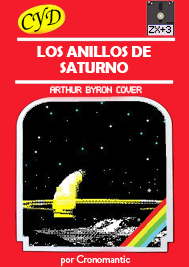
<style>
.page{position:relative;width:189px;height:267px;background:#f41c2b}
.page>*{position:absolute;margin:0}
.t1{font:24px "Calgary-MediumItalic";letter-spacing:-0.025em;color:#000000}
.t2{font:16px "AventurasAD";letter-spacing:-0.025em;color:#000000}
.t3{font:16px/16px "BerlinSansFBDemi-Bold";letter-spacing:-0.025em;color:#ffffff}
.t4{font:15px "AventurasAD";letter-spacing:-0.025em;color:#ffffff}
.t5{font:11px "BrandonGrotesque-Regular";letter-spacing:-0.025em;color:#ffffff}
</style>
<div class="page">
<p class="t1" style="left:21px;top:7px;width:40px;height:26px;rotate:-11deg">CYD</p>
<p class="t2" style="left:148px;top:25px;width:24px;height:9px">ZX+3</p>
<p class="t3" style="left:37px;top:46px;width:114px;height:27px;text-align:center">LOS ANILLOS DE <br>SATURNO</p>
<p class="t4" style="left:50px;top:86px;width:92px;height:8px">ARTHUR BYRON COVER</p>
<p class="t5" style="left:61px;top:255px;width:70px;height:11px">por Cronomantic</p>
</div>
